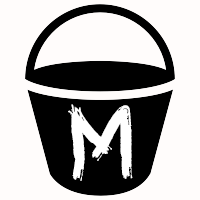
<style>
.page{position:relative;width:200px;height:200px;background:#fffcfb}
.page>*{position:absolute;margin:0}
.t1{font:72px "StiffBrushJK";color:#ffffff}
</style>
<div class="page">
<p class="t1" style="left:68px;top:104px;width:65px;height:77px">M</p>
</div>
